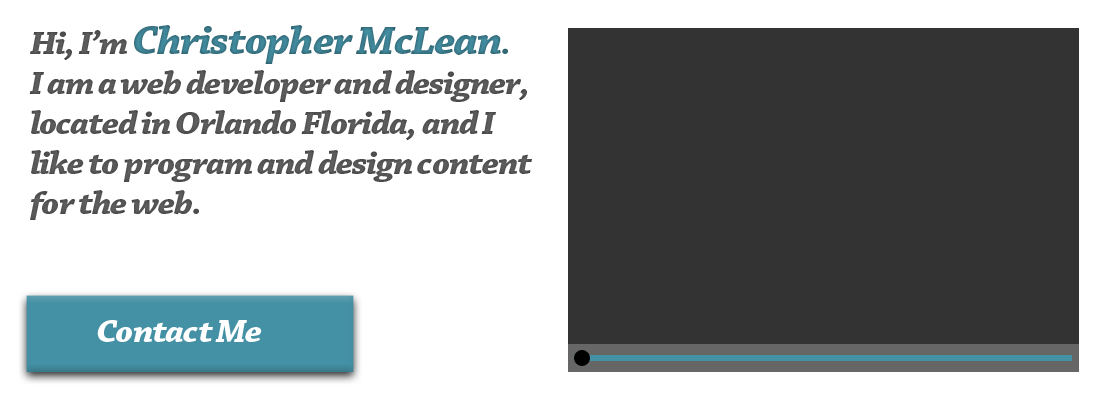
<style>
.page{position:relative;width:1100px;height:400px;background:#ffffff}
.page>*{position:absolute;margin:0}
.t1{font:33.3px "ChaparralPro-BoldIt";letter-spacing:-0.035em;color:#666666;scale:1.08 1}
.t2{font:41.7px "ChaparralPro-BoldIt";letter-spacing:-0.035em;color:#4490a4;scale:1.08 1}
.t3{font:33.3px "ChaparralPro-BoldIt";letter-spacing:-0.035em;color:#418a9d;scale:1.08 1}
.t4{font:33.3px "ChaparralPro-BoldIt";letter-spacing:-0.035em;color:#ffffff;scale:1.08 1}
</style>
<div class="page">
<p class="t1" style="left:29px;top:25px;width:503px;height:195px">Hi, I’m <span class="t2">Christopher McLean</span><span class="t3">.</span> <br>I am a web developer and designer, located in Orlando Florida, and I like to program and design content for the web.</p>
<p class="t4" style="left:97px;top:320px;width:165px;height:22px">Contact Me</p>
</div>
